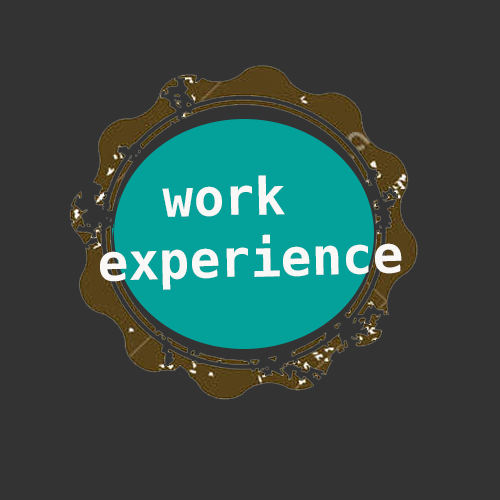
<style>
.page{position:relative;width:500px;height:500px;background:#333333}
.page>*{position:absolute;margin:0}
.t1{font:51.6px "Menlo-Bold";color:#faf8f6}
</style>
<div class="page">
<p class="t1" style="left:100px;top:175px;width:302px;height:115px;rotate:-2deg">work <br>experience</p>
</div>
